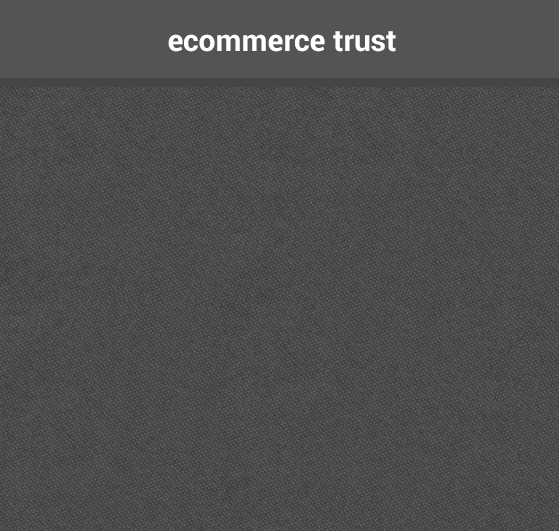
<style>
.page{position:relative;width:559px;height:531px}
.page>*{position:absolute;margin:0}
.t1{font:30px "Roboto-Bold";color:#ffffff}
</style>
<div class="page">
<p class="t1" style="left:168px;top:31px;width:228px;height:21px">ecommerce trust</p>
</div>
